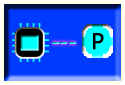
<style>
.page{position:relative;width:125px;height:85px;background:#003afe}
.page>*{position:absolute;margin:0}
.t1{font:21px "Verdana";color:#000000;font-weight:bold}
</style>
<div class="page">
<p class="t1" style="left:93px;top:33px;width:11px;height:17px">P</p>
</div>
